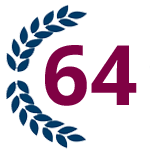
<style>
.page{position:relative;width:150px;height:150px;background:#ffffff}
.page>*{position:absolute;margin:0}
.t1{font:83.3px "OpenSans-Bold";color:#800144;text-transform:uppercase}
</style>
<div class="page">
<p class="t1" style="left:45px;top:45px;width:92px;height:61px">64</p>
</div>
